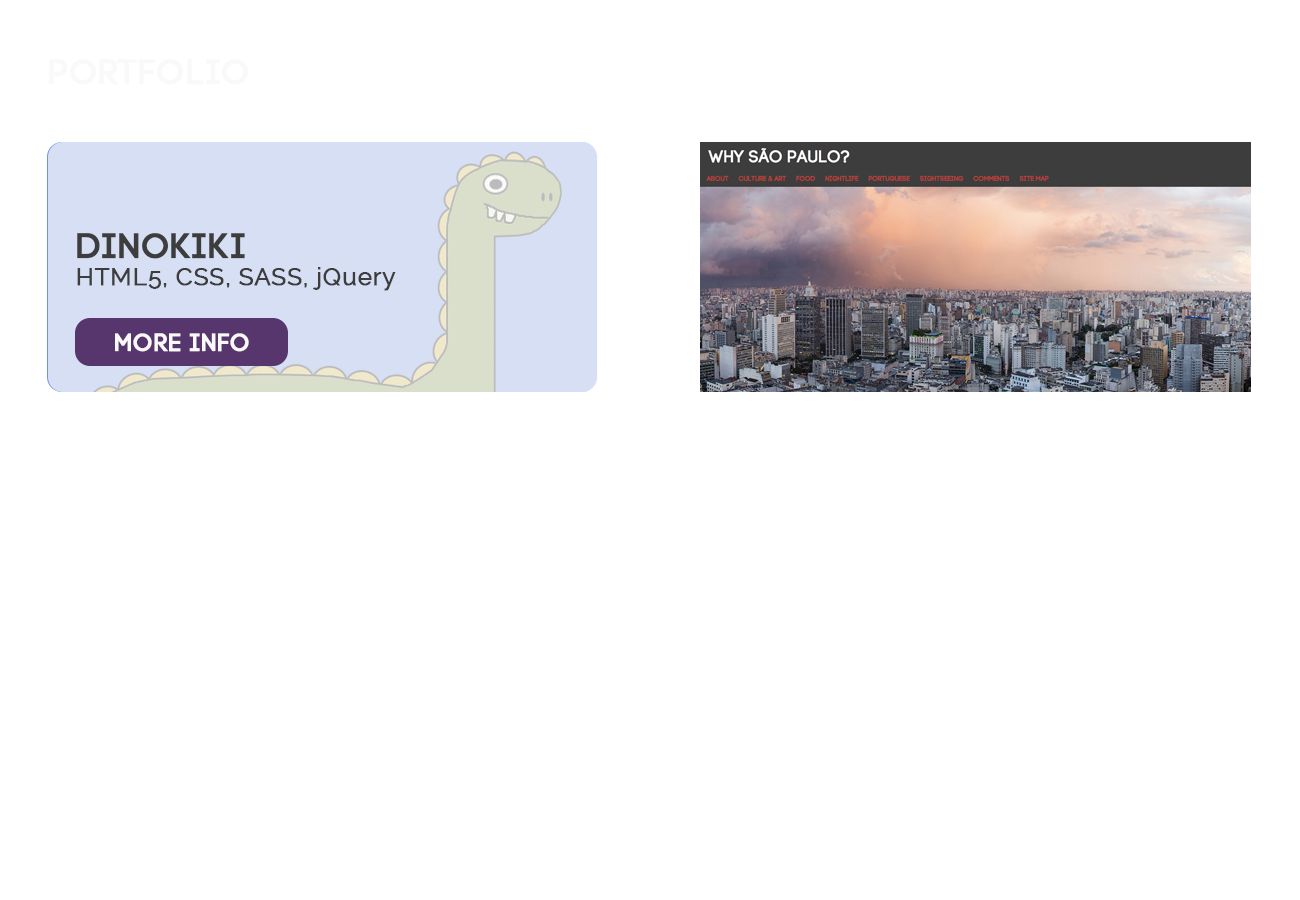
<style>
.page{position:relative;width:1300px;height:900px;background:#ffffff}
.page>*{position:absolute;margin:0}
.t1{font:60px "Code-Pro-Demo";letter-spacing:0.01em;color:#f9f9f9;font-weight:bold}
.t2{font:60px "Code-Pro-Demo";letter-spacing:0.01em;color:#3d3d3d;font-weight:bold}
.t3{font:42px "Raleway-Regular";letter-spacing:0.01em;color:#3d3d3d;font-weight:bold}
.t4{font:42px "Code-Pro-Demo";letter-spacing:0.01em;color:#f9f9f9;font-weight:bold}
</style>
<div class="page">
<p class="t1" style="left:49px;top:59px;width:200px;height:26px">Portfolio</p>
<p class="t2" style="left:77px;top:233px;width:168px;height:26px">Dinokiki</p>
<p class="t3" style="left:77px;top:267px;width:319px;height:24px">HTML5, CSS, SASS, jQuery</p>
<p class="t4" style="left:115px;top:333px;width:134px;height:19px">More Info</p>
</div>
